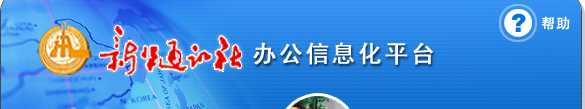
<style>
.page{position:relative;width:585px;height:109px}
.page>*{position:absolute;margin:0}
.t1{font:25.2px "Arial-Black";letter-spacing:0.05em;color:#0073de}
.t2{font:14px "SimHei";letter-spacing:0.05em;color:#ffffff;font-weight:bold}
.t3{font:24px "SimHei";letter-spacing:0.075em;color:#ffffff;font-weight:bold}
</style>
<div class="page">
<p class="t1" style="left:511px;top:13px;width:15px;height:19px">?</p>
<p class="t2" style="left:541px;top:16px;width:29px;height:14px">帮助</p>
<p class="t3" style="left:253px;top:42px;width:181px;height:23px">办公信息化平台</p>
</div>
